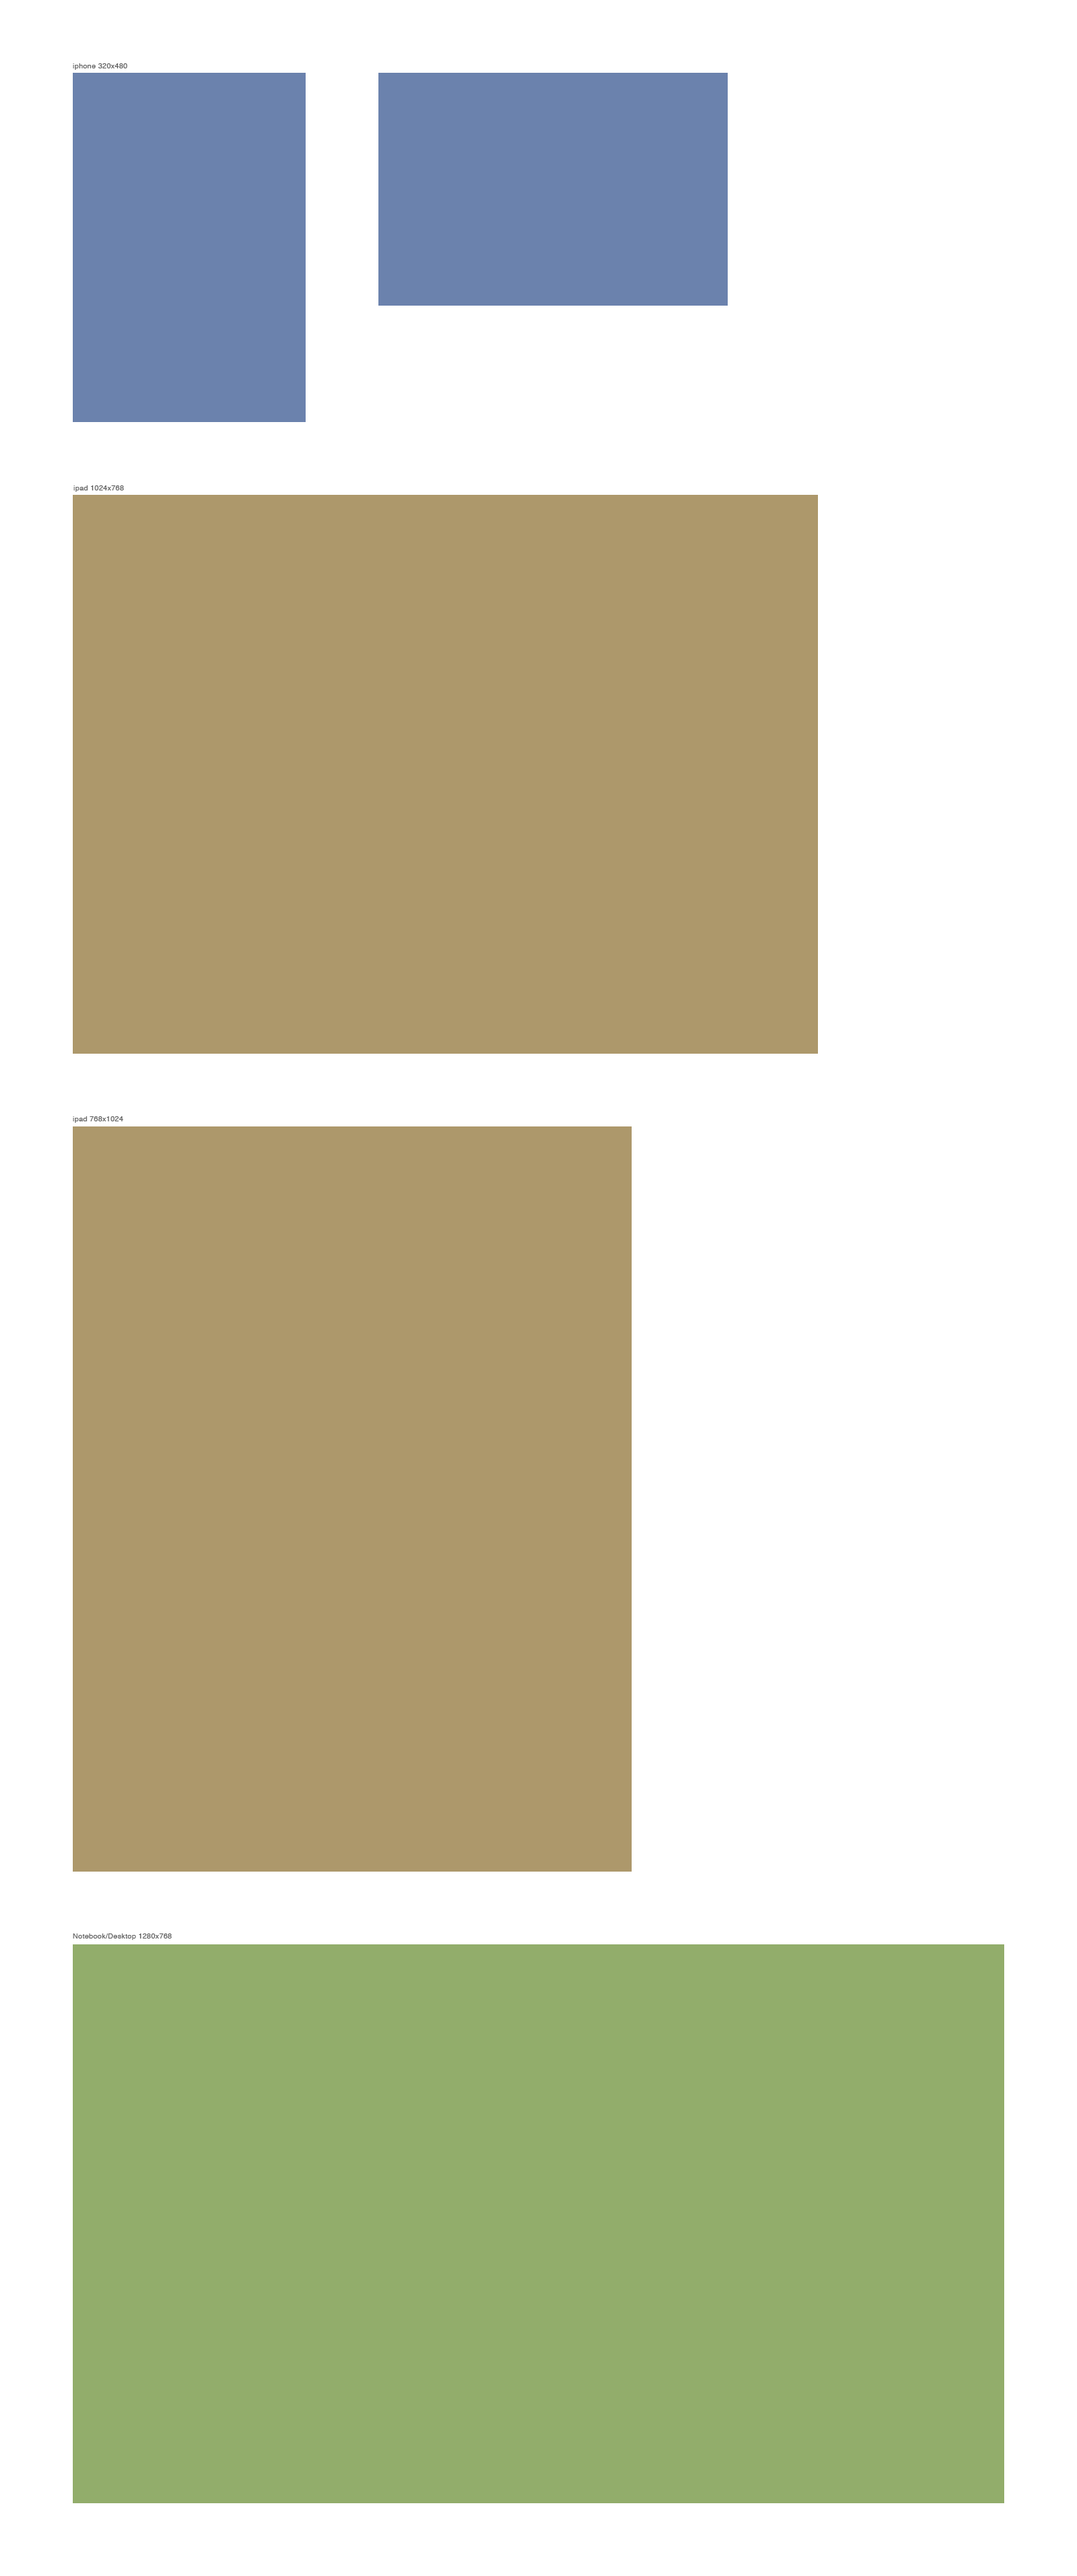
<style>
.page{position:relative;width:1077px;height:2576px;background:#ffffff}
.page>*{position:absolute;margin:0}
.t1{font:7.3px "Helvetica";letter-spacing:0.03em;color:#666666}
</style>
<div class="page">
<p class="t1" style="left:73px;top:63px;width:54px;height:7px">iphone 320x480</p>
<p class="t1" style="left:73px;top:485px;width:51px;height:7px">ipad 1024x768</p>
<p class="t1" style="left:73px;top:1116px;width:51px;height:7px">ipad 768x1024</p>
<p class="t1" style="left:73px;top:1933px;width:99px;height:7px">Notebook/Desktop 1280x768</p>
</div>
